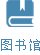
<style>
.page{position:relative;width:40px;height:55px;background:#ffffff}
.page>*{position:absolute;margin:0}
.t1{font:22.5px "SimSun";letter-spacing:0.075em;color:#4788b2;font-variant:small-caps}
</style>
<div class="page">
<p class="t1" style="left:1px;top:39px;width:39px;height:12px">图书馆</p>
</div>
